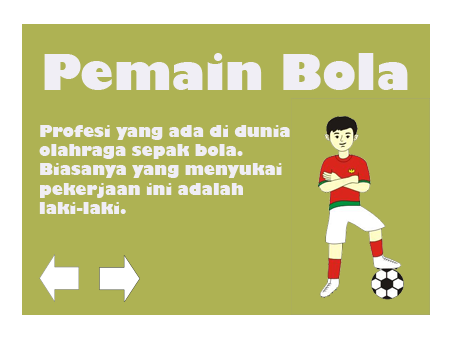
<style>
.page{position:relative;width:454px;height:340px;background:#aeb253}
.page>*{position:absolute;margin:0}
.t1{font:48px "GillSans-UltraBold";color:#f0eef5}
.t2{font:16px "GillSans-UltraBold";color:#f0eef5}
</style>
<div class="page">
<p class="t1" style="left:44px;top:53px;width:364px;height:37px">Pemain Bola</p>
<p class="t2" style="left:39px;top:125px;width:251px;height:89px">Profesi yang ada di dunia<br>olahraga sepak bola.<br>Biasanya yang menyukai<br>pekerjaan ini adalah<br>laki-laki.</p>
</div>
